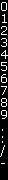
<style>
.page{position:relative;width:8px;height:180px;background:#000000}
.page>*{position:absolute;margin:0}
.t1{font:12px/12px "Verdana";color:#ffffff}
</style>
<div class="page">
<p class="t1" style="left:0px;top:2px;width:8px;height:162px">0<br>1<br>2<br>3<br>4<br>5<br>6<br>7<br>8<br>9<br>.<br>:<br>/<br>-</p>
</div>
